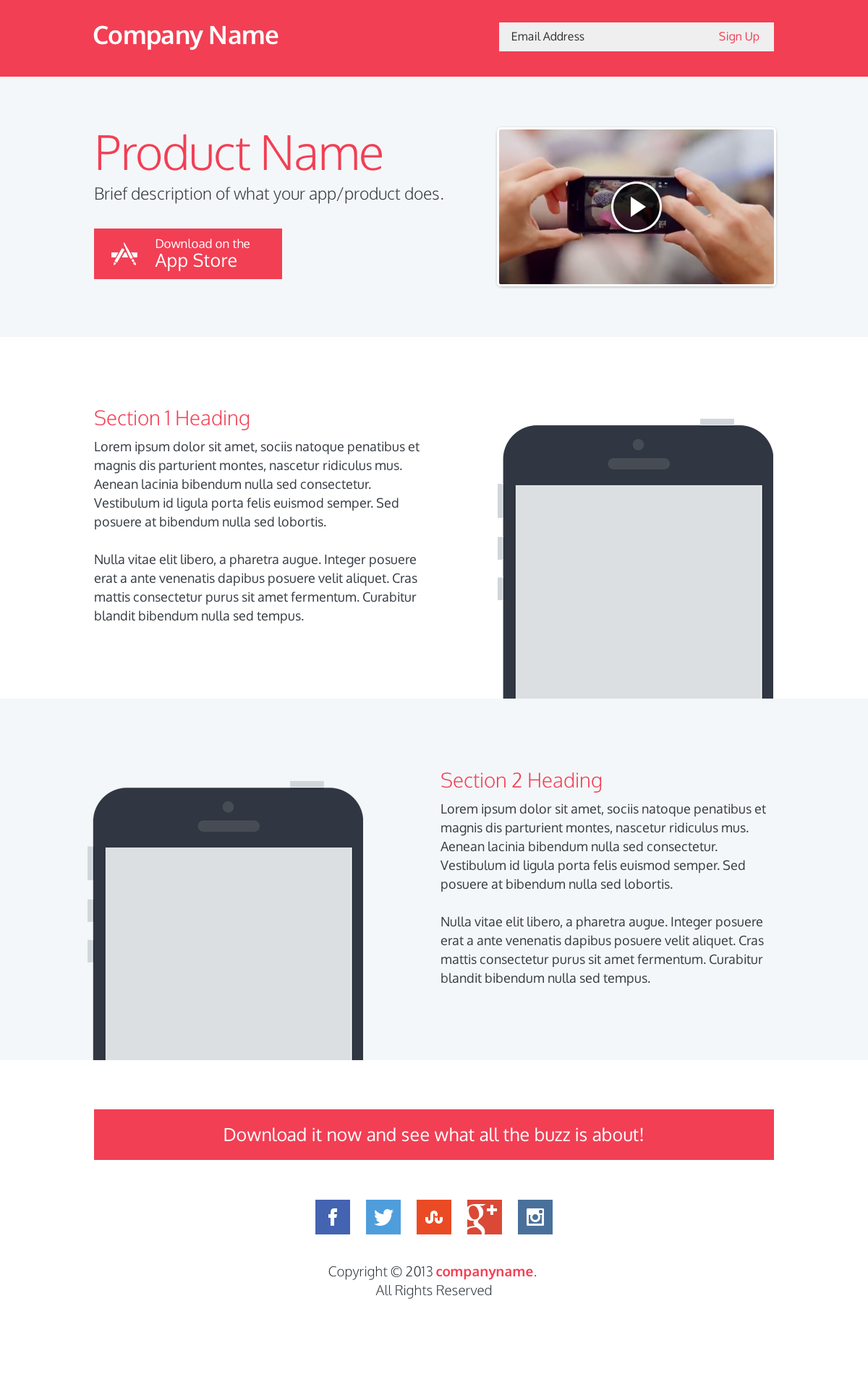
<style>
.page{position:relative;width:868px;height:1374px;background:#ffffff}
.page>*{position:absolute;margin:0}
.t1{font:25.3px "Oxygen-Bold";letter-spacing:-0.02em;color:#ffffff}
.t2{font:11.6px "Oxygen-Regular";color:#333333}
.t3{font:11.6px "Oxygen-Regular";color:#f23f54}
.t4{font:16.6px/29.7px "Oxygen-Light";color:#353b42}
.t5{font:47.7px/29.7px "Oxygen-Light";letter-spacing:-0.02em;color:#f23f54}
.t6{font:12.3px/18.8px "Oxygen-Regular";color:#fefefe}
.t7{font:18.1px/18.8px "Oxygen-Regular";color:#fefefe}
.t8{font:13px/18.8px "Oxygen-Regular";color:#353b42}
.t9{font:20.2px/29.7px "Oxygen-Light";color:#f23f54}
.t10{font:13px/26px "Oxygen-Regular";color:#353b42}
.t11{font:18.1px "Oxygen-Regular";color:#fefefe}
.t12{font:13.7px/18.8px "Oxygen-Light";color:#353b42}
.t13{font:13.7px/18.8px "Oxygen-Bold";color:#f23f54}
</style>
<div class="page">
<p class="t1" style="left:93px;top:25px;width:185px;height:25px">Company Name</p>
<p class="t2" style="left:512px;top:32px;width:72px;height:9px">Email Address</p>
<p class="t3" style="left:719px;top:32px;width:40px;height:11px">Sign Up</p>
<p class="t4" style="left:95px;top:134px;width:348px;height:70px"><span class="t5">Product Name<br></span>Brief description of what your app/product does.</p>
<p class="t6" style="left:155px;top:239px;width:94px;height:32px">Download on the <br><span class="t7">App Store</span></p>
<p class="t8" style="left:94px;top:410px;width:325px;height:214px"><span class="t9">Section 1 Heading<br></span><span class="t10">L</span>orem ipsum dolor sit amet, sociis natoque penatibus et magnis dis parturient montes, nascetur ridiculus mus. Aenean lacinia bibendum nulla sed consectetur. Vestibulum id ligula porta felis euismod semper. Sed posuere at bibendum nulla sed lobortis.<br><br>Nulla vitae elit libero, a pharetra augue. Integer posuere erat a ante venenatis dapibus posuere velit aliquet. Cras mattis consectetur purus sit amet fermentum. Curabitur blandit bibendum nulla sed tempus.</p>
<p class="t8" style="left:440px;top:772px;width:326px;height:214px"><span class="t9">Section 2 Heading<br></span><span class="t10">L</span>orem ipsum dolor sit amet, sociis natoque penatibus et magnis dis parturient montes, nascetur ridiculus mus. Aenean lacinia bibendum nulla sed consectetur. Vestibulum id ligula porta felis euismod semper. Sed posuere at bibendum nulla sed lobortis.<br><br>Nulla vitae elit libero, a pharetra augue. Integer posuere erat a ante venenatis dapibus posuere velit aliquet. Cras mattis consectetur purus sit amet fermentum. Curabitur blandit bibendum nulla sed tempus.</p>
<p class="t11" style="left:224px;top:1127px;width:419px;height:15px">Download it now and see what all the buzz is about!</p>
<p class="t12" style="left:328px;top:1266px;width:209px;height:33px;text-align:center">Copyright © 2013 <span class="t13">companyname</span>. <br>All Rights Reserved</p>
</div>
